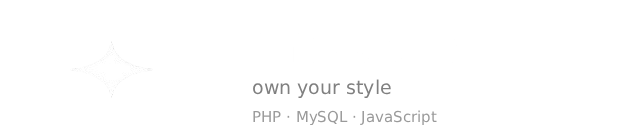
<style>
.page{position:relative;width:620px;height:140px;background:#ffffff}
.page>*{position:absolute;margin:0}
.t1{font:19px "ui-monospace";color:#808080}
.t2{font:15px "ui-monospace";color:#9a9a9a}
</style>
<div class="page">
<p class="t1" style="left:253px;top:79px;width:138px;height:19px">own your style</p>
<p class="t2" style="left:253px;top:110px;width:184px;height:16px">PHP · MySQL · JavaScript</p>
</div>
